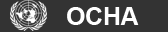
<style>
.page{position:relative;width:168px;height:32px;background:#333333}
.page>*{position:absolute;margin:0}
.t1{font:24.6px "Arial-BoldMT";color:#ffffff}
</style>
<div class="page">
<p class="t1" style="left:67px;top:7px;width:72px;height:18px">OCHA</p>
</div>
